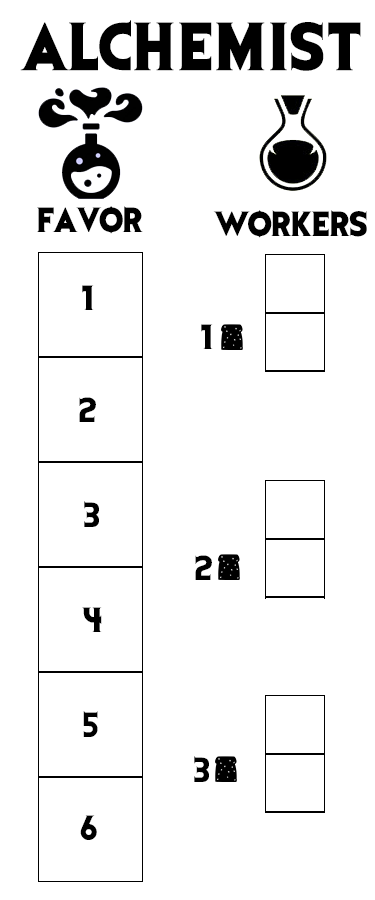
<style>
.page{position:relative;width:375px;height:900px;background:#ffffff}
.page>*{position:absolute;margin:0}
.t1{font:56.2px "EvilDead";letter-spacing:0.05em;color:#000000}
.t2{font:29.2px "EvilDead";color:#000000}
</style>
<div class="page">
<p class="t1" style="left:20px;top:20px;width:341px;height:51px">ALCHEMIST</p>
<p class="t2" style="left:37px;top:206px;width:106px;height:28px">FAVOR</p>
<p class="t2" style="left:213px;top:210px;width:154px;height:28px">WORKERS</p>
<p class="t2" style="left:82px;top:285px;width:12px;height:25px">1</p>
<p class="t2" style="left:201px;top:324px;width:12px;height:25px">1</p>
<p class="t2" style="left:79px;top:397px;width:17px;height:25px">2</p>
<p class="t2" style="left:84px;top:501px;width:15px;height:26px">3</p>
<p class="t2" style="left:195px;top:555px;width:17px;height:25px">2</p>
<p class="t2" style="left:82px;top:607px;width:20px;height:25px">4</p>
<p class="t2" style="left:83px;top:711px;width:15px;height:26px">5</p>
<p class="t2" style="left:194px;top:756px;width:15px;height:26px">3</p>
<p class="t2" style="left:80px;top:815px;width:17px;height:25px">6</p>
</div>
